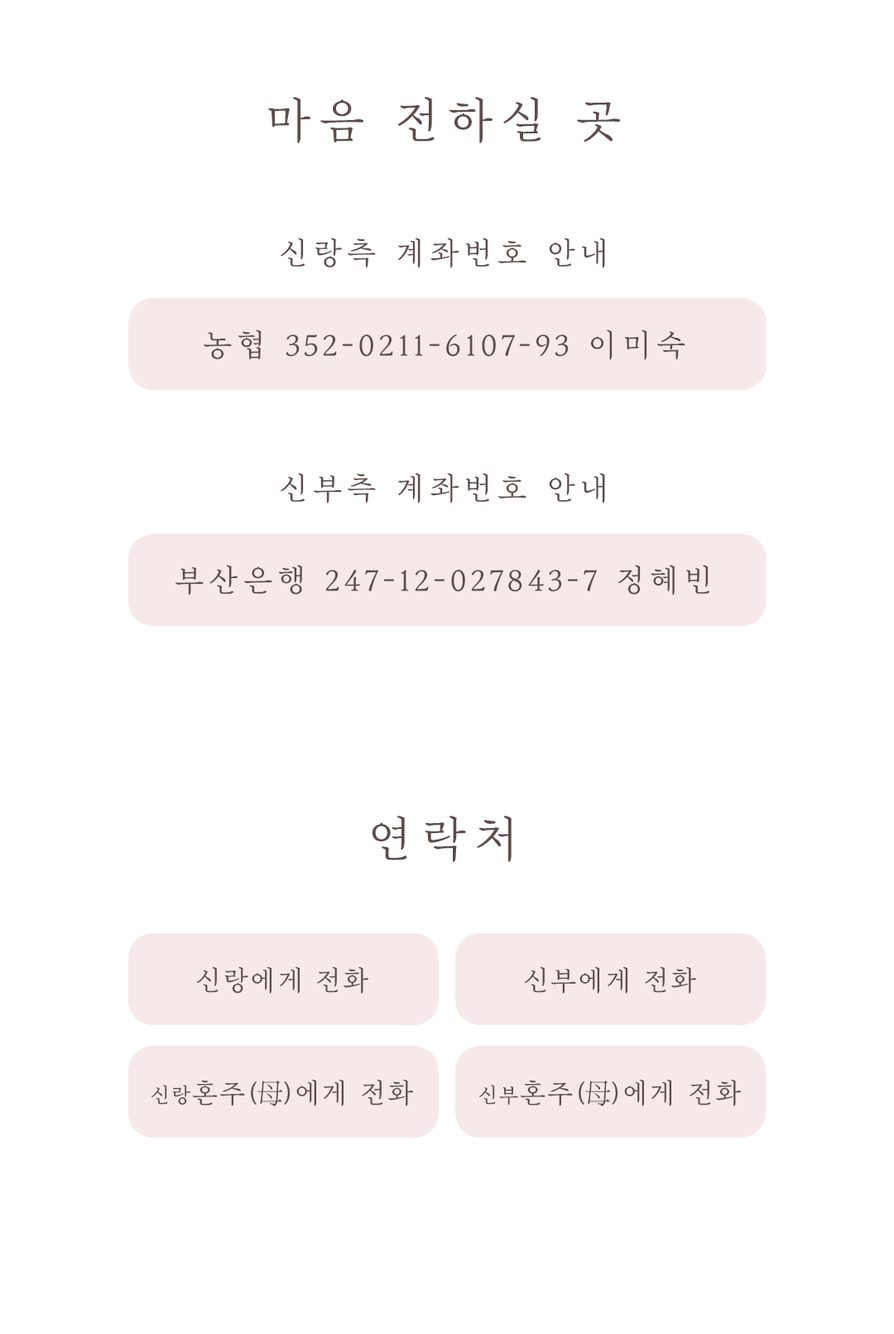
<style>
.page{position:relative;width:894px;height:1334px;background:#ffffff}
.page>*{position:absolute;margin:0}
.t1{font:48.3px "MapoGoldenPier";letter-spacing:0.1em;color:#5f4b4b}
.t2{font:31px "MapoGoldenPier";letter-spacing:0.1em;color:#5f4b4b}
.t3{font:27.6px "MapoGoldenPier";color:#5f4b4b}
.t4{font:20.7px "MapoGoldenPier";color:#5f4b4b}
.t5{font:27.6px "GyeonggiBatangB";color:#5f4b4b}
</style>
<div class="page">
<p class="t1" style="left:268px;top:97px;width:353px;height:46px">마음 전하실 곳</p>
<p class="t2" style="left:281px;top:238px;width:324px;height:30px">신랑측 계좌번호 안내</p>
<p class="t2" style="left:204px;top:329px;width:481px;height:31px">농협 352-0211-6107-93 이미숙</p>
<p class="t2" style="left:281px;top:473px;width:324px;height:30px">신부측 계좌번호 안내</p>
<p class="t2" style="left:176px;top:565px;width:533px;height:30px">부산은행 247-12-027843-7 정혜빈</p>
<p class="t1" style="left:372px;top:815px;width:140px;height:47px">연락처</p>
<p class="t3" style="left:196px;top:966px;width:173px;height:27px">신랑에게 전화</p>
<p class="t3" style="left:524px;top:966px;width:173px;height:27px">신부에게 전화</p>
<p class="t3" style="left:151px;top:1079px;width:263px;height:27px"><span class="t4">신랑</span>혼주(<span class="t5">母</span>)에게 전화</p>
<p class="t3" style="left:479px;top:1079px;width:263px;height:27px"><span class="t4">신부</span>혼주(<span class="t5">母</span>)에게 전화</p>
</div>
